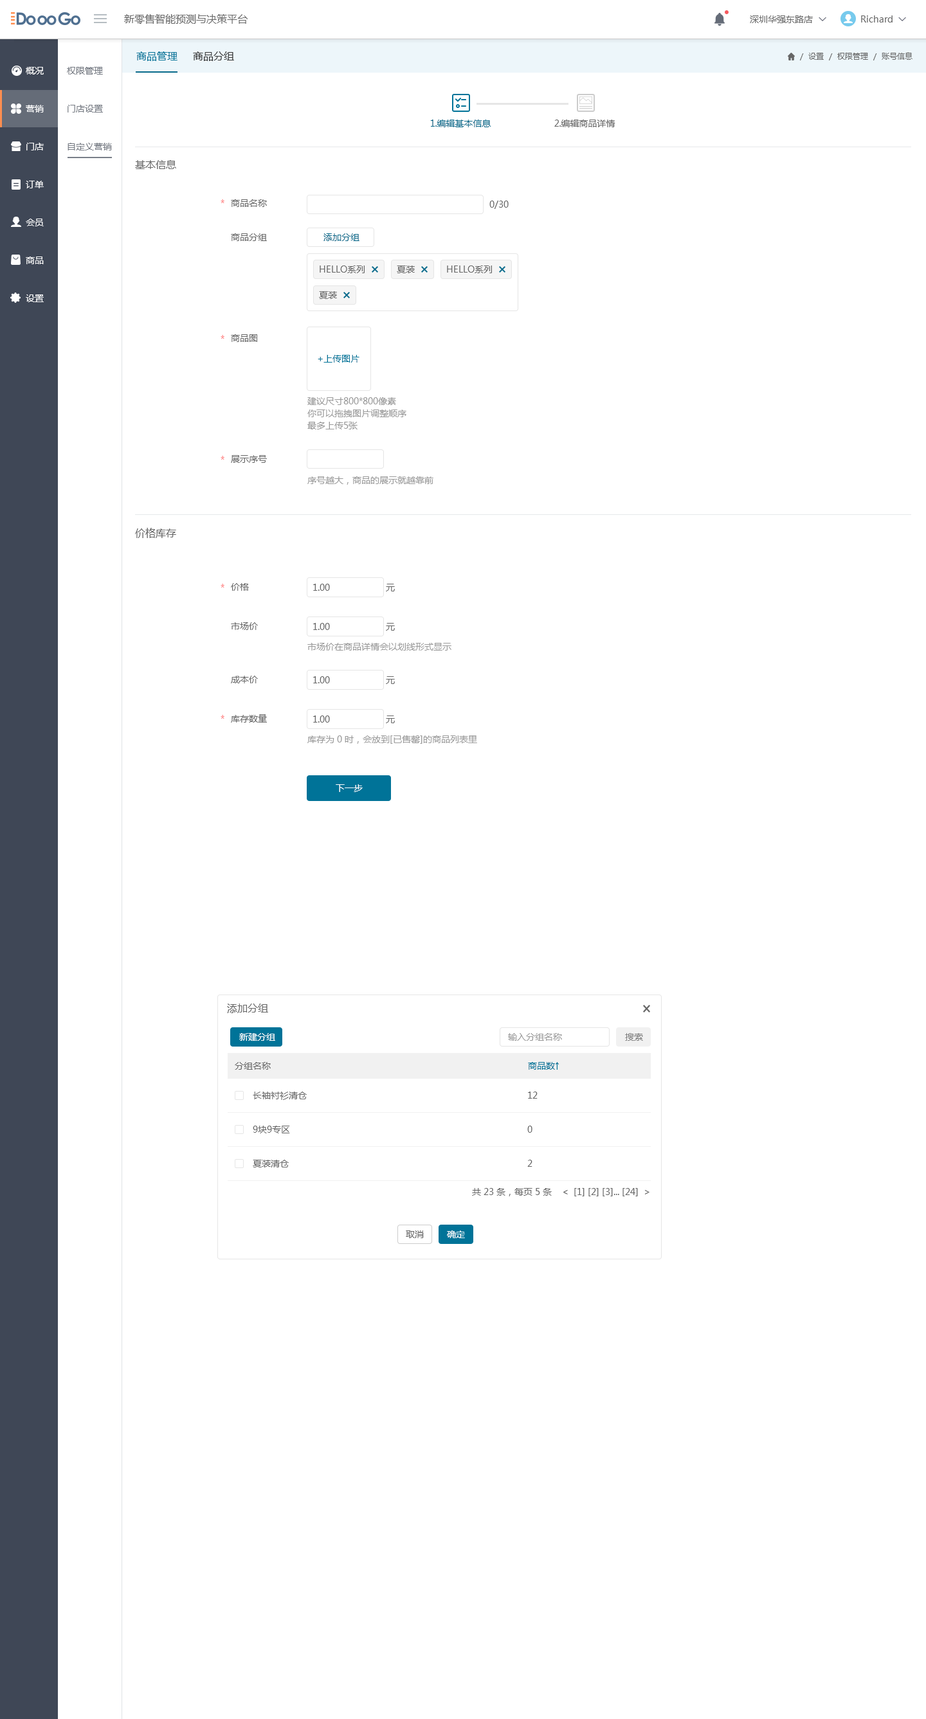
<style>
.page{position:relative;width:926px;height:1719px;background:#ffffff}
.page>*{position:absolute;margin:0}
.t1{font:10.3px "MicrosoftYaHeiUI";color:#666666}
.t2{font:9px "MicrosoftYaHeiUI";color:#666666}
.t3{font:9px "Marlett";color:#666666}
.t4{font:10.3px "MicrosoftYaHeiUI";color:#007398}
.t5{font:10.3px "MicrosoftYaHeiUI";color:#333333}
.t6{font:7.7px "MicrosoftYaHeiUI";color:#666666}
.t7{font:9px/37.9px "MicrosoftYaHeiUI";color:#ffffff}
.t8{font:9px/37.9px "MicrosoftYaHeiUI";color:#747982}
.t9{font:9px "MicrosoftYaHeiUI";color:#086a8b}
.t10{font:9px "MicrosoftYaHeiUI";color:#ff7474}
.t11{font:9px "MicrosoftYaHeiUI";color:#007398}
.t12{font:9px/12.2px "MicrosoftYaHeiUI";color:#999999}
.t13{font:9px "MicrosoftYaHeiUI";color:#999999}
.t14{font:9px "MicrosoftYaHeiUI";color:#ffffff}
.t15{font:9px "MicrosoftYaHeiUI";color:#808080}
</style>
<div class="page">
<p class="t1" style="left:124px;top:14px;width:124px;height:10px">新零售智能预测与决策平台</p>
<p class="t2" style="left:750px;top:15px;width:63px;height:8px">深圳华强东路店</p>
<p class="t2" style="left:861px;top:15px;width:42px;height:7px">Richard <span class="t3">6</span></p>
<p class="t4" style="left:136px;top:51px;width:41px;height:10px">商品管理</p>
<p class="t5" style="left:193px;top:51px;width:41px;height:10px">商品分组</p>
<p class="t6" style="left:800px;top:52px;width:112px;height:8px">/  设置  /  权限管理  /  账号信息</p>
<p class="t7" style="left:26px;top:67px;width:18px;height:235px">概况<br>营销<br>门店<br>订单<br>会员<br>商品<br>设置</p>
<p class="t8" style="left:67px;top:67px;width:45px;height:83px">权限管理<br>门店设置<br>自定义营销</p>
<p class="t9" style="left:430px;top:120px;width:61px;height:7px">1.编辑基本信息</p>
<p class="t2" style="left:554px;top:120px;width:61px;height:7px">2.编辑商品详情</p>
<p class="t1" style="left:135px;top:160px;width:41px;height:9px">基本信息</p>
<p class="t10" style="left:221px;top:199px;width:3px;height:4px">*</p>
<p class="t2" style="left:231px;top:199px;width:36px;height:8px">商品名称</p>
<p class="t2" style="left:489px;top:201px;width:20px;height:8px">0/30</p>
<p class="t2" style="left:231px;top:233px;width:36px;height:8px">商品分组</p>
<p class="t9" style="left:323px;top:233px;width:36px;height:8px">添加分组</p>
<p class="t2" style="left:320px;top:266px;width:44px;height:7px">HELLO系列</p>
<p class="t2" style="left:397px;top:266px;width:18px;height:7px">夏装</p>
<p class="t2" style="left:447px;top:266px;width:45px;height:7px">HELLO系列</p>
<p class="t2" style="left:319px;top:291px;width:18px;height:8px">夏装</p>
<p class="t10" style="left:221px;top:335px;width:3px;height:4px">*</p>
<p class="t2" style="left:231px;top:334px;width:26px;height:8px">商品图</p>
<p class="t11" style="left:318px;top:355px;width:41px;height:8px">+上传图片</p>
<p class="t12" style="left:307px;top:397px;width:99px;height:32px">建议尺寸800*800像素<br>你可以拖拽图片调整顺序<br>最多上传5张</p>
<p class="t10" style="left:221px;top:456px;width:3px;height:4px">*</p>
<p class="t2" style="left:231px;top:455px;width:36px;height:8px">展示序号</p>
<p class="t13" style="left:307px;top:476px;width:126px;height:9px">序号越大，商品的展示就越靠前</p>
<p class="t1" style="left:135px;top:528px;width:41px;height:10px">价格库存</p>
<p class="t10" style="left:221px;top:584px;width:3px;height:4px">*</p>
<p class="t2" style="left:231px;top:583px;width:18px;height:8px">价格</p>
<p class="t2" style="left:313px;top:584px;width:17px;height:7px">1.00</p>
<p class="t2" style="left:386px;top:584px;width:9px;height:7px">元</p>
<p class="t2" style="left:231px;top:622px;width:27px;height:8px">市场价</p>
<p class="t2" style="left:313px;top:623px;width:17px;height:7px">1.00</p>
<p class="t2" style="left:386px;top:623px;width:9px;height:8px">元</p>
<p class="t13" style="left:307px;top:643px;width:144px;height:8px">市场价在商品详情会以划线形式显示</p>
<p class="t2" style="left:231px;top:676px;width:27px;height:7px">成本价</p>
<p class="t2" style="left:313px;top:676px;width:17px;height:7px">1.00</p>
<p class="t2" style="left:386px;top:676px;width:9px;height:8px">元</p>
<p class="t10" style="left:221px;top:715px;width:3px;height:4px">*</p>
<p class="t2" style="left:231px;top:714px;width:36px;height:9px">库存数量</p>
<p class="t2" style="left:313px;top:716px;width:17px;height:7px">1.00</p>
<p class="t2" style="left:386px;top:716px;width:9px;height:7px">元</p>
<p class="t13" style="left:307px;top:735px;width:170px;height:9px">库存为 0 时，会放到[已售罄]的商品列表里</p>
<p class="t14" style="left:336px;top:784px;width:27px;height:8px">下一步</p>
<p class="t1" style="left:227px;top:1004px;width:41px;height:9px">添加分组</p>
<p class="t14" style="left:239px;top:1033px;width:36px;height:8px">新建分组</p>
<p class="t13" style="left:508px;top:1033px;width:54px;height:8px">输入分组名称</p>
<p class="t15" style="left:625px;top:1033px;width:18px;height:8px">搜索</p>
<p class="t2" style="left:235px;top:1062px;width:36px;height:8px">分组名称</p>
<p class="t11" style="left:528px;top:1062px;width:31px;height:8px">商品数↑</p>
<p class="t2" style="left:253px;top:1092px;width:54px;height:8px">长袖衬衫清仓</p>
<p class="t2" style="left:528px;top:1092px;width:9px;height:7px">12</p>
<p class="t2" style="left:253px;top:1126px;width:37px;height:7px">9块9专区</p>
<p class="t2" style="left:527px;top:1126px;width:5px;height:7px">0</p>
<p class="t2" style="left:253px;top:1160px;width:36px;height:7px">夏装清仓</p>
<p class="t2" style="left:527px;top:1160px;width:5px;height:7px">2</p>
<p class="t2" style="left:472px;top:1188px;width:177px;height:8px">共 23 条，每页 5 条    &lt;  [1] [2] [3]... [24]  &gt;</p>
<p class="t2" style="left:406px;top:1230px;width:18px;height:8px">取消</p>
<p class="t14" style="left:447px;top:1230px;width:18px;height:8px">确定</p>
</div>
